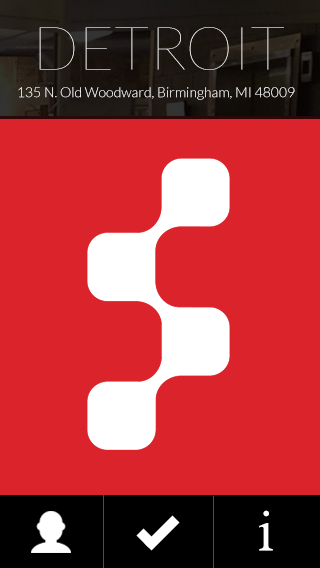
<style>
.page{position:relative;width:320px;height:568px;background:#db232c}
.page>*{position:absolute;margin:0}
.t1{font:60px "Lato-Hairline"}
.t2{font:14px "Lato-Light";color:#ffffff}
.t3{font:60px "FootlightMTLight";color:#ffffff}
</style>
<div class="page">
<p class="t1" style="left:39px;top:27px;width:245px;height:43px">DETROIT</p>
<p class="t2" style="left:18px;top:87px;width:277px;height:13px">135 N. Old Woodward, Birmingham, MI 48009</p>
<p class="t3" style="left:259px;top:510px;width:14px;height:41px">i</p>
</div>
